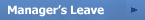
<style>
.page{position:relative;width:145px;height:20px}
.page>*{position:absolute;margin:0}
.t1{font:11.5px "Tahoma-Bold";color:#ffffff}
</style>
<div class="page">
<p class="t1" style="left:8px;top:5px;width:96px;height:12px">Manager’s Leave</p>
</div>
